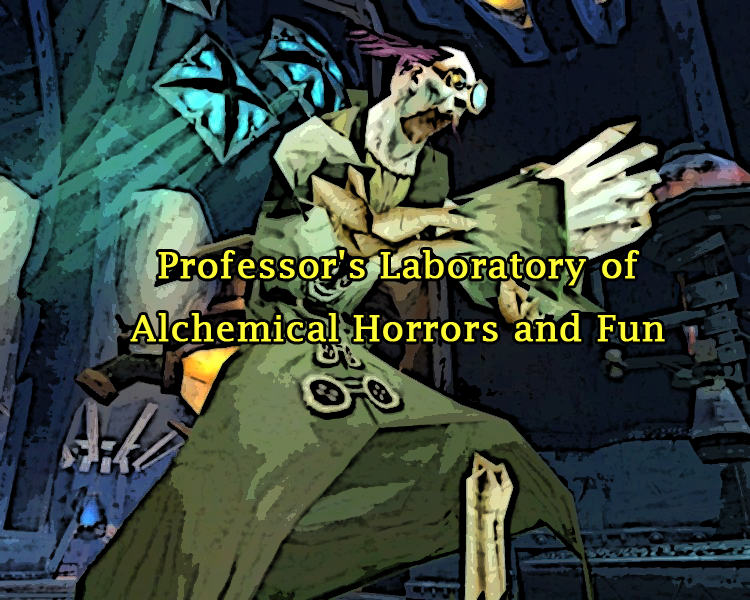
<style>
.page{position:relative;width:750px;height:600px}
.page>*{position:absolute;margin:0}
.t1{font:36px "LucidaFax";color:#fdfb34;font-weight:bold}
</style>
<div class="page">
<p class="t1" style="left:130px;top:250px;width:535px;height:92px;text-align:center">Professor's Laboratory of Alchemical Horrors and Fun</p>
</div>
